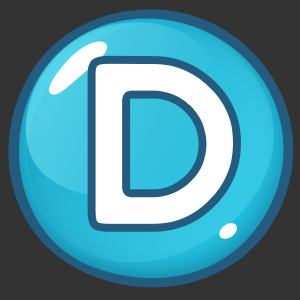
<style>
.page{position:relative;width:300px;height:300px;background:#333333}
.page>*{position:absolute;margin:0}
.t1{font:240px "FredokaOne-Regular";color:#ffffff}
</style>
<div class="page">
<p class="t1" style="left:87px;top:55px;width:154px;height:177px">D</p>
</div>
